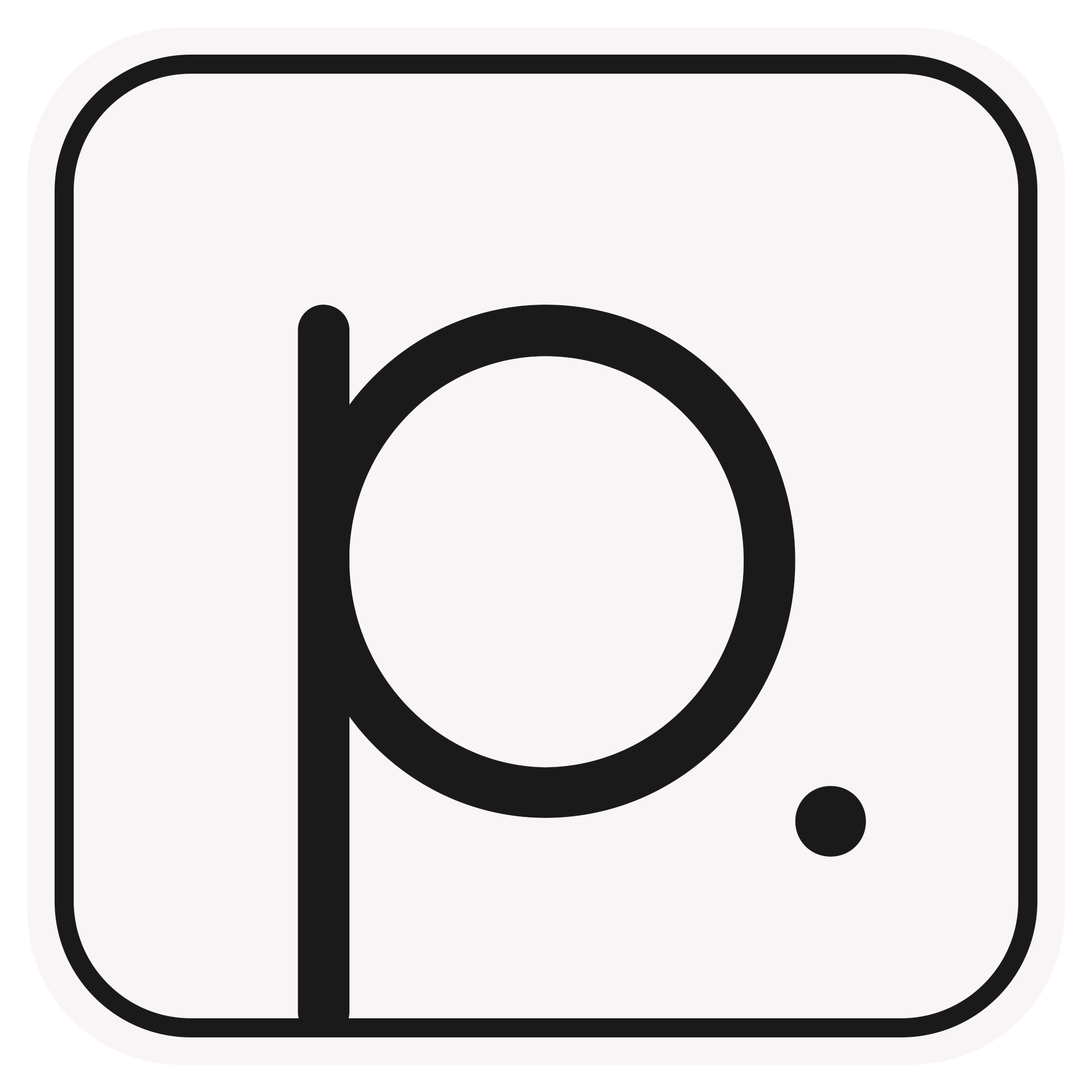
<style>
.page{position:relative;width:1092px;height:1092px;background:#f9f5f6}
.page>*{position:absolute;margin:0}
.t1{font:1054.1px "QuicksandBook-Regular";color:#1a1a1a}
.t2{font:707.6px "QuicksandBook-Regular";color:#1a1a1a}
</style>
<div class="page">
<p class="t1" style="left:298px;top:304px;width:498px;height:733px">p</p>
<p class="t2" style="left:795px;top:786px;width:71px;height:71px">.</p>
</div>
